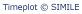
<style>
.page{position:relative;width:82px;height:14px;background:#ffffff}
.page>*{position:absolute;margin:0}
.t1{font:8.3px "Verdana";letter-spacing:-0.025em;color:#253a7a}
</style>
<div class="page">
<p class="t1" style="left:2px;top:3px;width:77px;height:9px">Timeplot © SIMILE</p>
</div>
